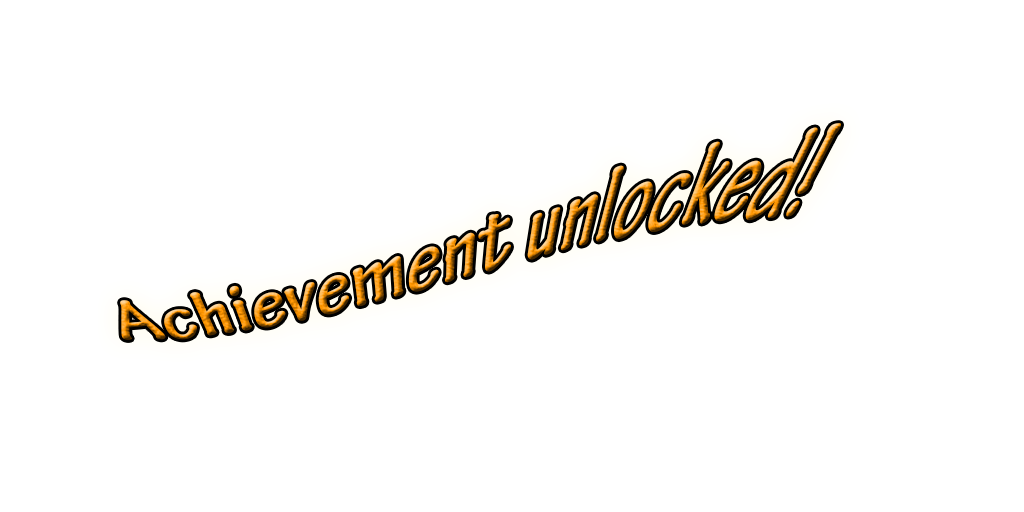
<style>
.page{position:relative;width:1024px;height:512px;background:#ffffff}
.page>*{position:absolute;margin:0}
.t1{font:95px/24px "TektonPro-BoldCond"}
</style>
<div class="page">
<p class="t1" style="left:120px;top:123px;width:721px;height:217px">Achievement unlocked!</p>
</div>
